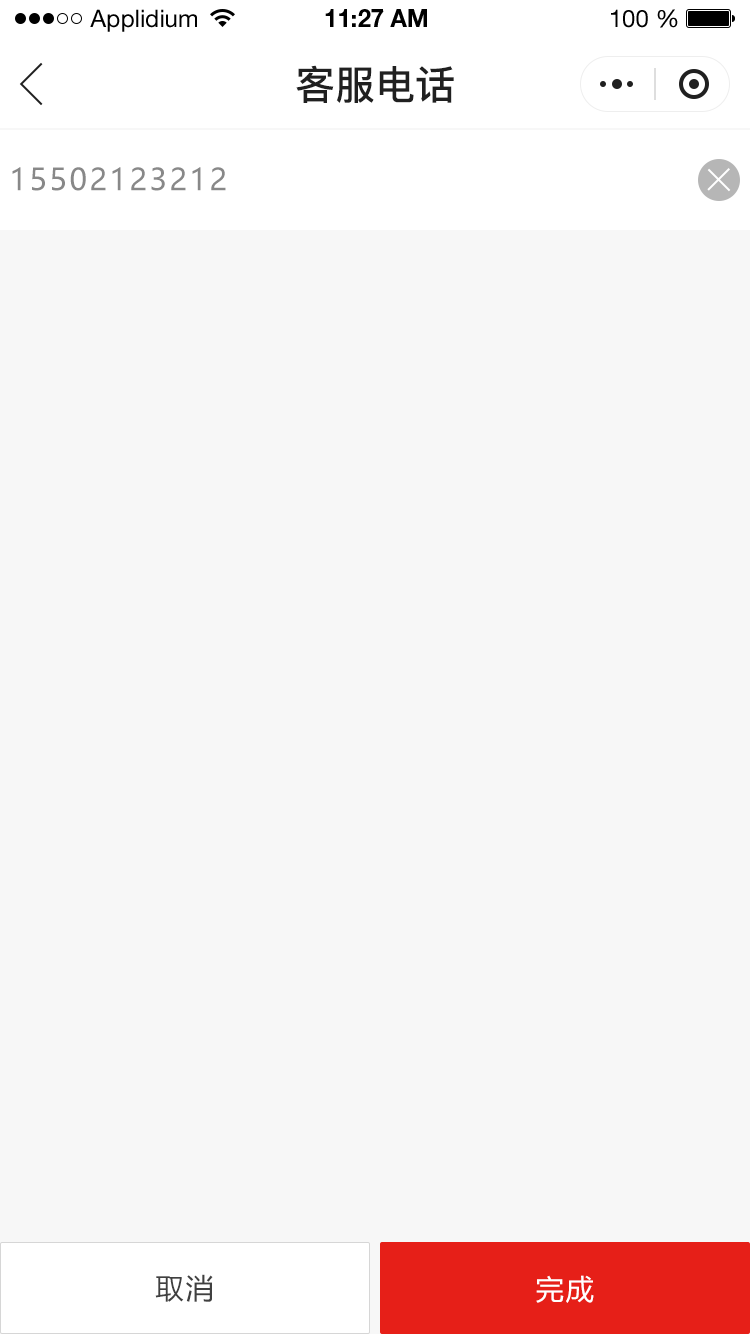
<style>
.page{position:relative;width:750px;height:1334px;background:#f7f7f7}
.page>*{position:absolute;margin:0}
.t1{font:24px "HelveticaNeueLTStd-Roman";color:#000000}
.t2{font:24px "HelveticaNeueLTStd-Bd";color:#000000}
.t3{font:40px "PingFang-SC-Bold";color:#202020;text-transform:uppercase}
.t4{font:30px "MicrosoftYaHei";letter-spacing:0.08em;color:#888888}
.t5{font:28px "MicrosoftYaHei";letter-spacing:0.08em;color:#404040}
.t6{font:28px "MicrosoftYaHei";letter-spacing:0.08em;color:#ffffff}
</style>
<div class="page">
<p class="t1" style="left:90px;top:9px;width:107px;height:23px">Applidium</p>
<p class="t2" style="left:325px;top:9px;width:102px;height:18px">11:27 AM</p>
<p class="t1" style="left:611px;top:9px;width:67px;height:19px">100 %</p>
<p class="t3" style="left:296px;top:65px;width:158px;height:38px">客服电话</p>
<p class="t4" style="left:12px;top:167px;width:214px;height:24px">15502123212</p>
<p class="t5" style="left:155px;top:1274px;width:58px;height:28px">取消</p>
<p class="t6" style="left:536px;top:1275px;width:58px;height:28px">完成</p>
</div>
